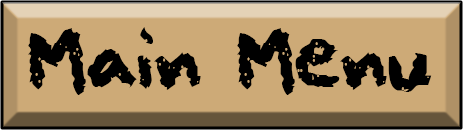
<style>
.page{position:relative;width:463px;height:130px;background:#cdaa77}
.page>*{position:absolute;margin:0}
.t1{font:70px "squeakychalksound";color:#000000}
</style>
<div class="page">
<p class="t1" style="left:28px;top:27px;width:404px;height:68px">Main Menu</p>
</div>
